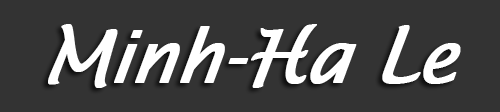
<style>
.page{position:relative;width:500px;height:112px;background:#333333}
.page>*{position:absolute;margin:0}
.t1{font:72px "LucidaSans-Italic";letter-spacing:-0.025em;color:#ffffff;font-weight:bold;font-style:italic}
.t2{font:72px "LucidaHandwriting-Italic";letter-spacing:-0.025em;color:#ffffff;font-weight:bold;font-style:italic}
</style>
<div class="page">
<p class="t1" style="left:48px;top:24px;width:413px;height:64px"><span class="t2">M</span>inh-<span class="t2">H</span>a <span class="t2">L</span>e</p>
</div>
